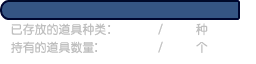
<style>
.page{position:relative;width:256px;height:64px;background:#ffffff}
.page>*{position:absolute;margin:0}
.t1{font:12px "FZY3--GB1-4";letter-spacing:0.025em;color:#bfbfbf;scale:0.97 1}
</style>
<div class="page">
<p class="t1" style="left:11px;top:23px;width:95px;height:13px">已存放的道具种类</p>
<p class="t1" style="left:196px;top:23px;width:12px;height:13px">种</p>
<p class="t1" style="left:11px;top:41px;width:83px;height:13px">持有的道具数量</p>
<p class="t1" style="left:196px;top:42px;width:12px;height:11px">个</p>
</div>
